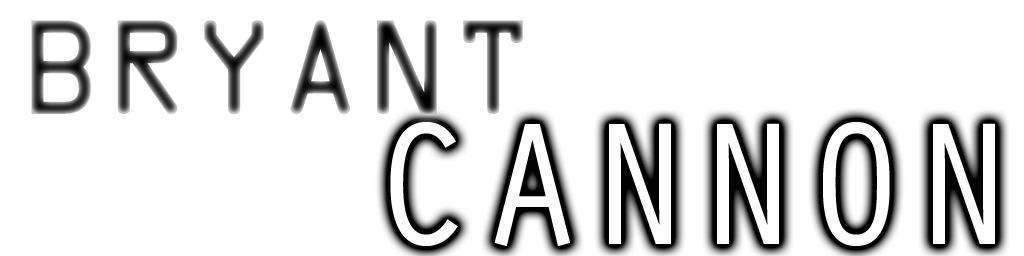
<style>
.page{position:relative;width:1024px;height:256px;background:#ffffff}
.page>*{position:absolute;margin:0}
.t1{font:120px "OCRAStd";color:#000000}
.t2{font:180px "OratorStd";color:#ffffff}
</style>
<div class="page">
<p class="t1" style="left:31px;top:20px;width:492px;height:94px">BRYANT</p>
<p class="t2" style="left:390px;top:122px;width:605px;height:124px">CANNON</p>
</div>
